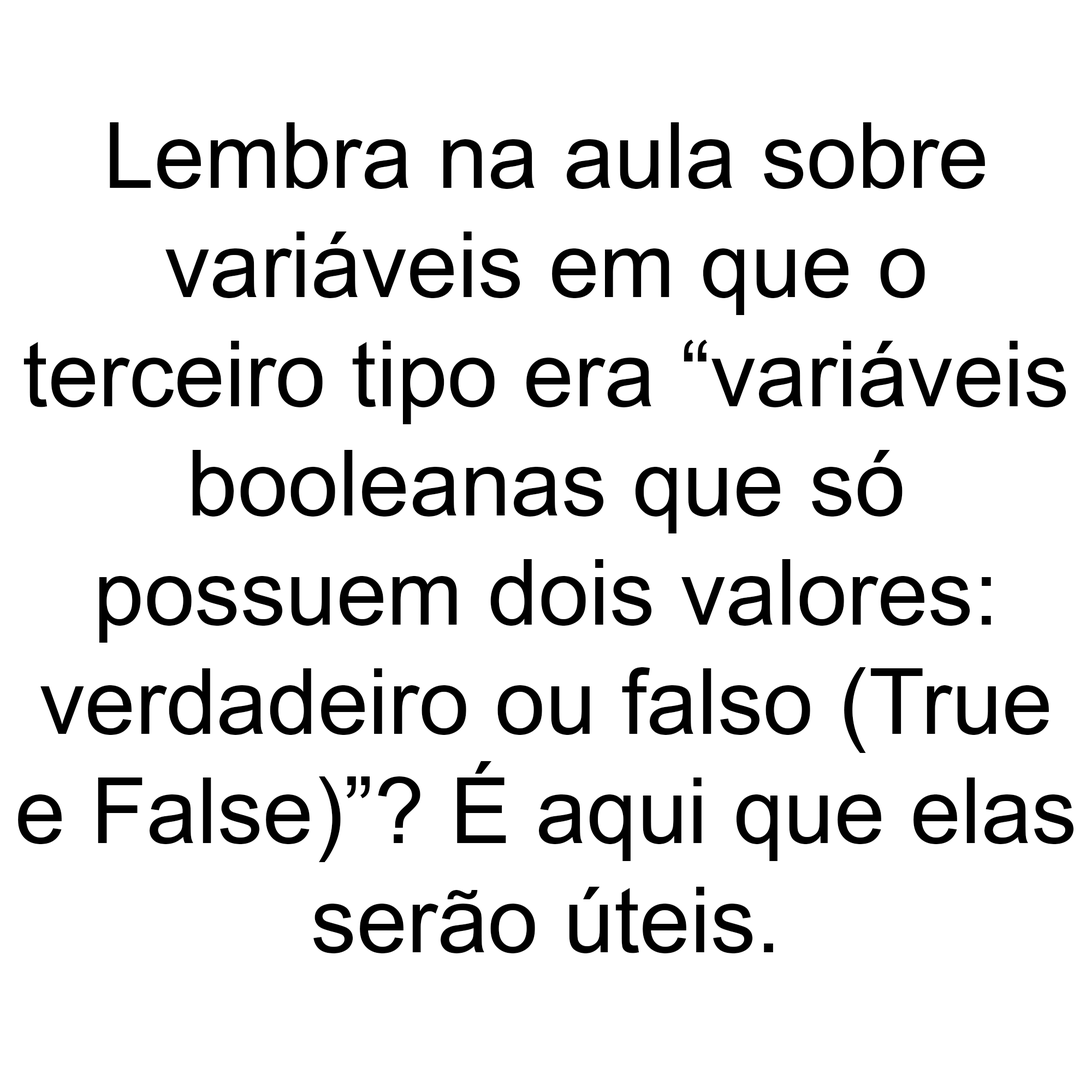
<style>
.page{position:relative;width:1092px;height:1092px;background:#ffffff}
.page>*{position:absolute;margin:0}
.t1{font:91px "ArialMT";color:#000000}
</style>
<div class="page">
<p class="t1" style="left:18px;top:122px;width:1056px;height:831px;text-align:center">Lembra na aula sobre<br>variáveis em que o<br>terceiro tipo era “variáveis<br>booleanas que só<br>possuem dois valores:<br>verdadeiro ou falso (True<br>e False)”? É aqui que elas<br>serão úteis.</p>
</div>
